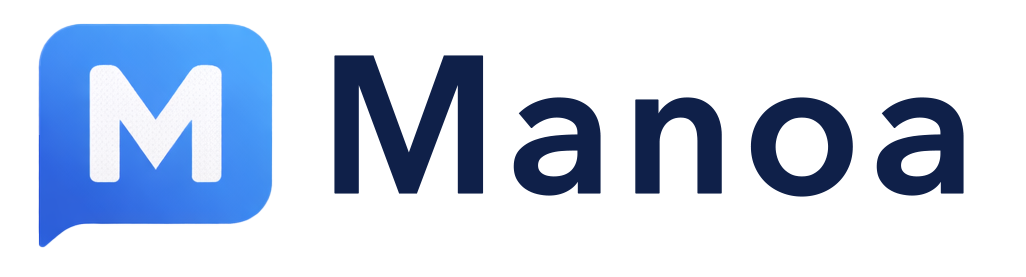
<style>
.page{position:relative;width:1026px;height:277px;background:#ffffff}
.page>*{position:absolute;margin:0}
.t1{font:192.8px "AvenirNext-DemiBold";letter-spacing:0.02em;color:#0f2049;font-weight:bold}
</style>
<div class="page">
<p class="t1" style="left:334px;top:55px;width:630px;height:142px">Manoa</p>
</div>
